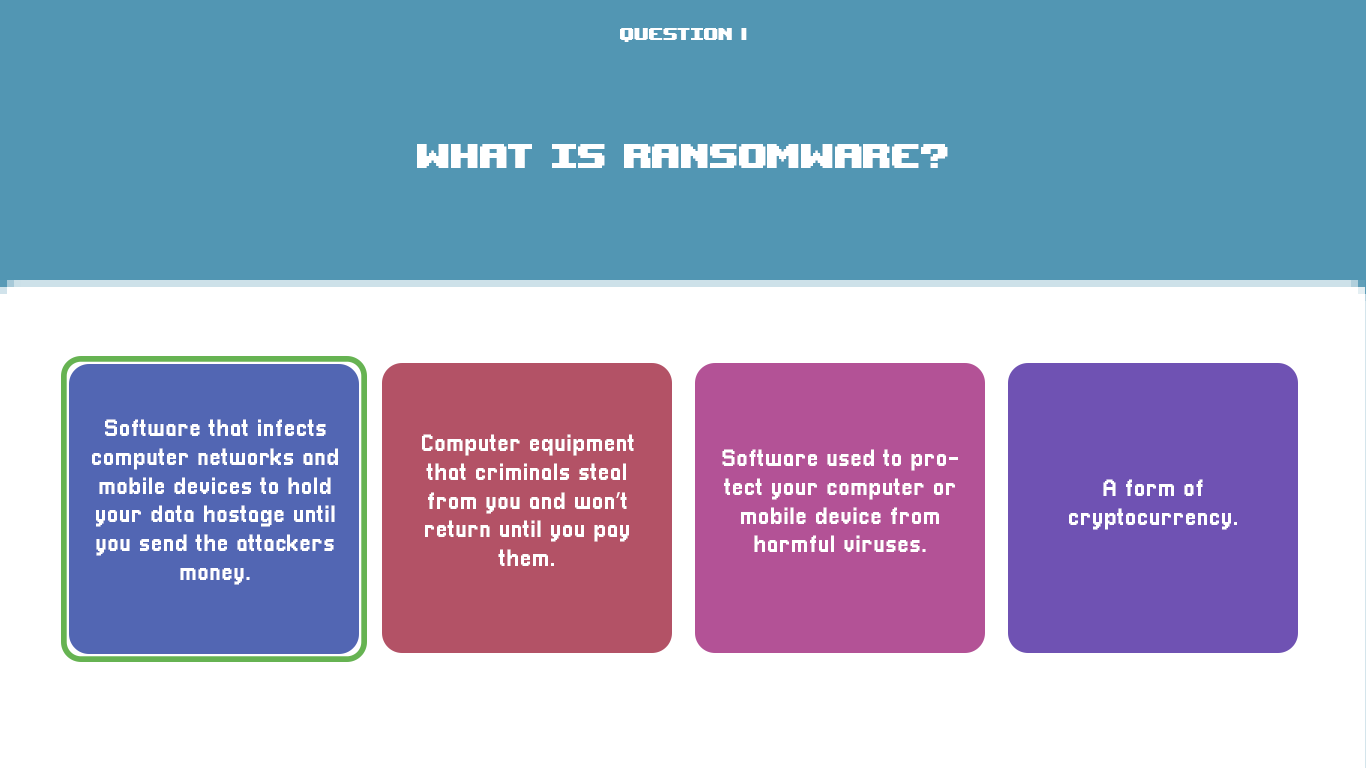
<style>
.page{position:relative;width:1366px;height:768px;background:#5296b3}
.page>*{position:absolute;margin:0}
.t1{font:24px "UpheavalTT-BRK-";color:#ffffff}
.t2{font:48px "UpheavalTT-BRK-";color:#ffffff}
.t3{font:24px "Pixellari";color:#ffffff}
.t4{font:24px "MyriadPro-Regular";color:#ffffff}
</style>
<div class="page">
<p class="t1" style="left:620px;top:28px;width:127px;height:14px">question 1</p>
<p class="t2" style="left:417px;top:144px;width:531px;height:24px">What is ransomware?</p>
<p class="t3" style="left:92px;top:419px;width:246px;height:166px;text-align:center">Software that infects computer networks and mobile devices to hold your data hostage until you send the attackers money.</p>
<p class="t3" style="left:422px;top:434px;width:212px;height:132px;text-align:center">Computer equipment that criminals steal from you and won<span class="t4">’</span>t return until you pay them.</p>
<p class="t3" style="left:722px;top:449px;width:236px;height:103px;text-align:center">Software used to protect your computer or mobile device from harmful viruses.</p>
<p class="t3" style="left:1069px;top:479px;width:168px;height:51px;text-align:center">A form of <br>cryptocurrency.</p>
</div>
